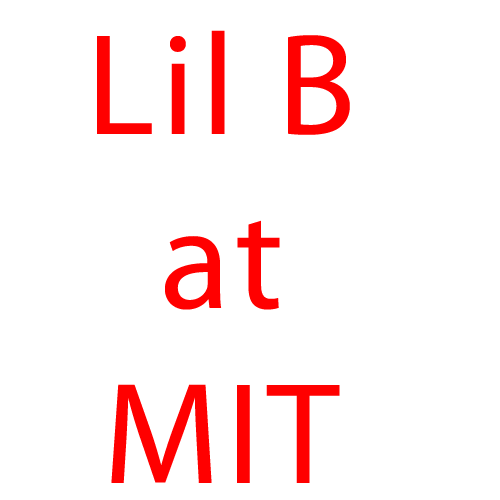
<style>
.page{position:relative;width:500px;height:500px;background:#ffffff}
.page>*{position:absolute;margin:0}
.t1{font:145.3px "MyriadPro-Regular";letter-spacing:0.04em;color:#ff0000}
</style>
<div class="page">
<p class="t1" style="left:97px;top:30px;width:253px;height:453px;text-align:center">Lil B<br>at<br>MIT</p>
</div>
